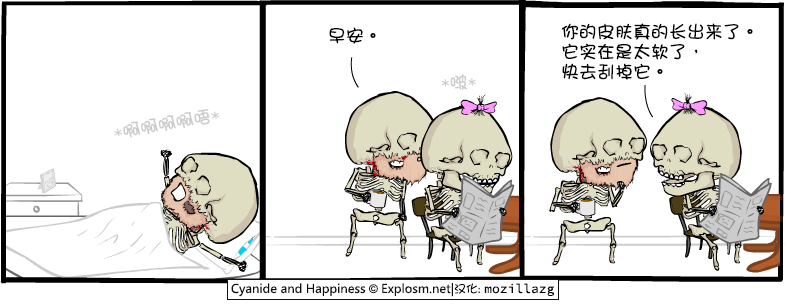
<style>
.page{position:relative;width:785px;height:305px;background:#ffffff}
.page>*{position:absolute;margin:0}
.t1{font:18px "DFGirl";color:#000000}
.t2{font:18px/20px "DFGirl";color:#000000}
.t3{font:18px "DFGirl";color:#cccccc}
</style>
<div class="page">
<p class="t1" style="left:329px;top:27px;width:47px;height:17px">早安。</p>
<p class="t2" style="left:561px;top:23px;width:192px;height:57px">你的皮肤真的长出来了。<br>它实在是太软了，<br>快去刮掉它。</p>
<p class="t3" style="left:441px;top:74px;width:35px;height:16px;rotate:-2deg">*啵*</p>
<p class="t3" style="left:114px;top:109px;width:106px;height:29px;rotate:-10deg">*啊啊啊啊唔*</p>
</div>
